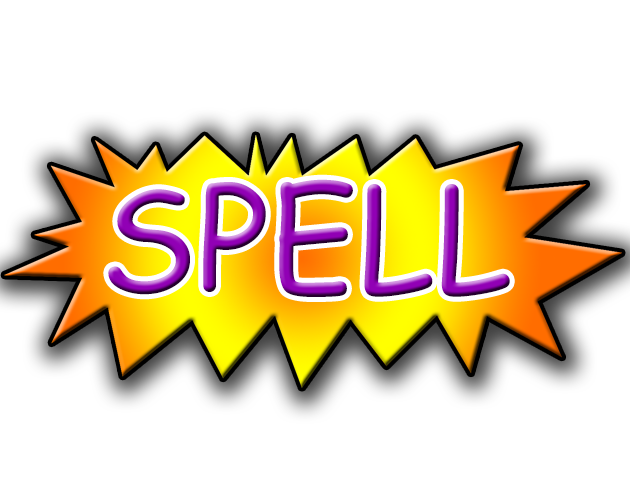
<style>
.page{position:relative;width:630px;height:500px;background:#ffffff}
.page>*{position:absolute;margin:0}
.t1{font:140.7px "ComicSansMS"}
</style>
<div class="page">
<p class="t1" style="left:108px;top:179px;width:402px;height:118px">SPELL</p>
</div>
